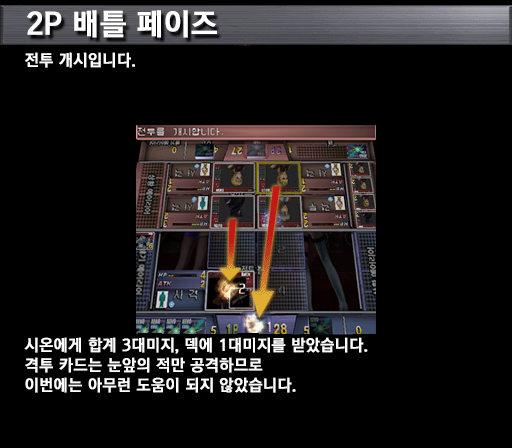
<style>
.page{position:relative;width:512px;height:448px;background:#000000}
.page>*{position:absolute;margin:0}
.t1{font:30px "KoreanGD15-R";color:#ffffff;font-weight:bold}
.t2{font:16px "KoreanGD15-R";color:#ffffff;font-weight:bold}
.t3{font:16px/20px "KoreanGD15-R";color:#ffffff;font-weight:bold}
</style>
<div class="page">
<p class="t1" style="left:27px;top:10px;width:190px;height:28px">2P 배틀 페이즈</p>
<p class="t2" style="left:25px;top:52px;width:110px;height:16px">전투 개시입니다.</p>
<p class="t3" style="left:24px;top:337px;width:344px;height:56px">시온에게 합계 3대미지, 덱에 1대미지를 받았습니다.<br>격투 카드는 눈앞의 적만 공격하므로<br>이번에는 아무런 도움이 되지 않았습니다.</p>
</div>
